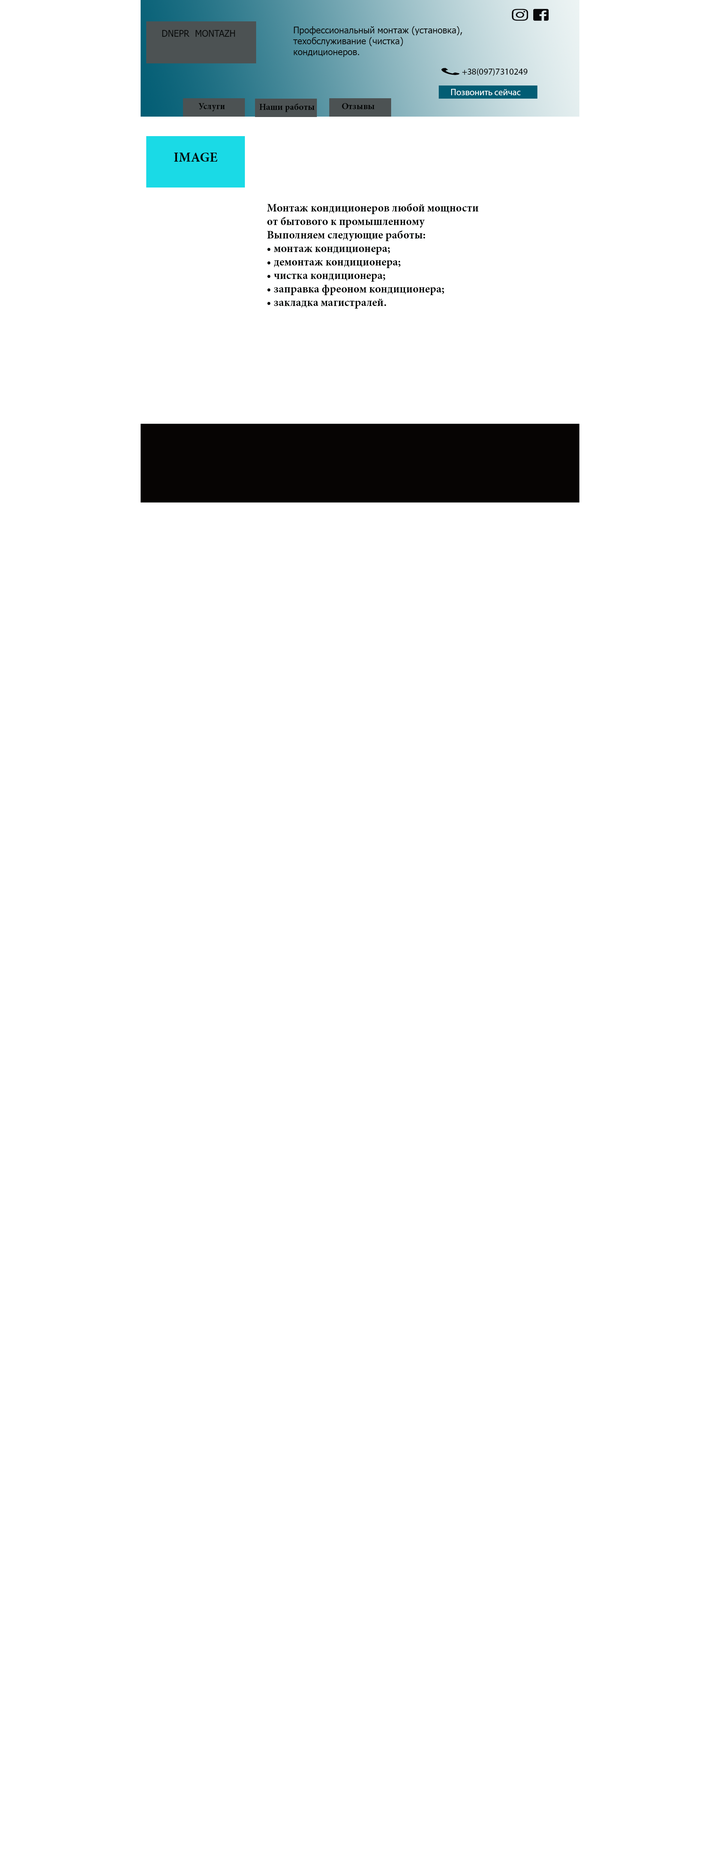
<style>
.page{position:relative;width:720px;height:1875px;background:#ffffff}
.page>*{position:absolute;margin:0}
.t1{font:9px "Tahoma";color:#090b0b}
.t2{font:9px "MyriadPro-Regular";color:#090b0b}
.t3{font:9px "MyriadPro-Regular";color:#ffffff}
.t4{font:9px "MinionPro-Bold";color:#030505}
.t5{font:13.5px "MinionPro-Bold";color:#030505}
.t6{font:11.2px "MinionPro-Bold";color:#030505}
</style>
<div class="page">
<p class="t1" style="left:162px;top:30px;width:73px;height:7px">DNEPR  MONTAZH</p>
<p class="t1" style="left:293px;top:26px;width:169px;height:31px">Профессиональный монтаж (установка),<br>техобслуживание (чистка)                 кондиционеров.</p>
<p class="t2" style="left:462px;top:68px;width:66px;height:8px">+38(097)7310249</p>
<p class="t3" style="left:451px;top:89px;width:69px;height:6px">Позвонить сейчас</p>
<p class="t4" style="left:198px;top:103px;width:27px;height:8px">Услуги</p>
<p class="t4" style="left:260px;top:104px;width:55px;height:8px">Наши работы</p>
<p class="t4" style="left:342px;top:103px;width:33px;height:6px">Отзывы</p>
<p class="t5" style="left:174px;top:153px;width:44px;height:9px">IMAGE</p>
<p class="t6" style="left:267px;top:203px;width:211px;height:106px">Монтаж кондиционеров любой мощности <br>от бытового к промышленному                                             <br>Выполняем следующие работы:<br>• монтаж кондиционера;<br>• демонтаж кондиционера;<br>• чистка кондиционера;<br>• заправка фреоном кондиционера;<br>• закладка магистралей.</p>
</div>
